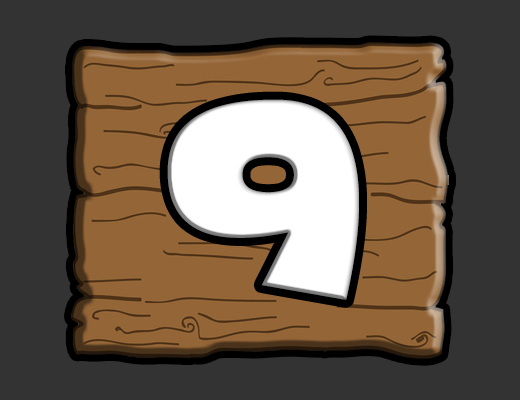
<style>
.page{position:relative;width:520px;height:400px;background:#333333}
.page>*{position:absolute;margin:0}
.t1{font:300px "Funhouse";color:#ffffff}
</style>
<div class="page">
<p class="t1" style="left:167px;top:99px;width:192px;height:201px">9</p>
</div>
